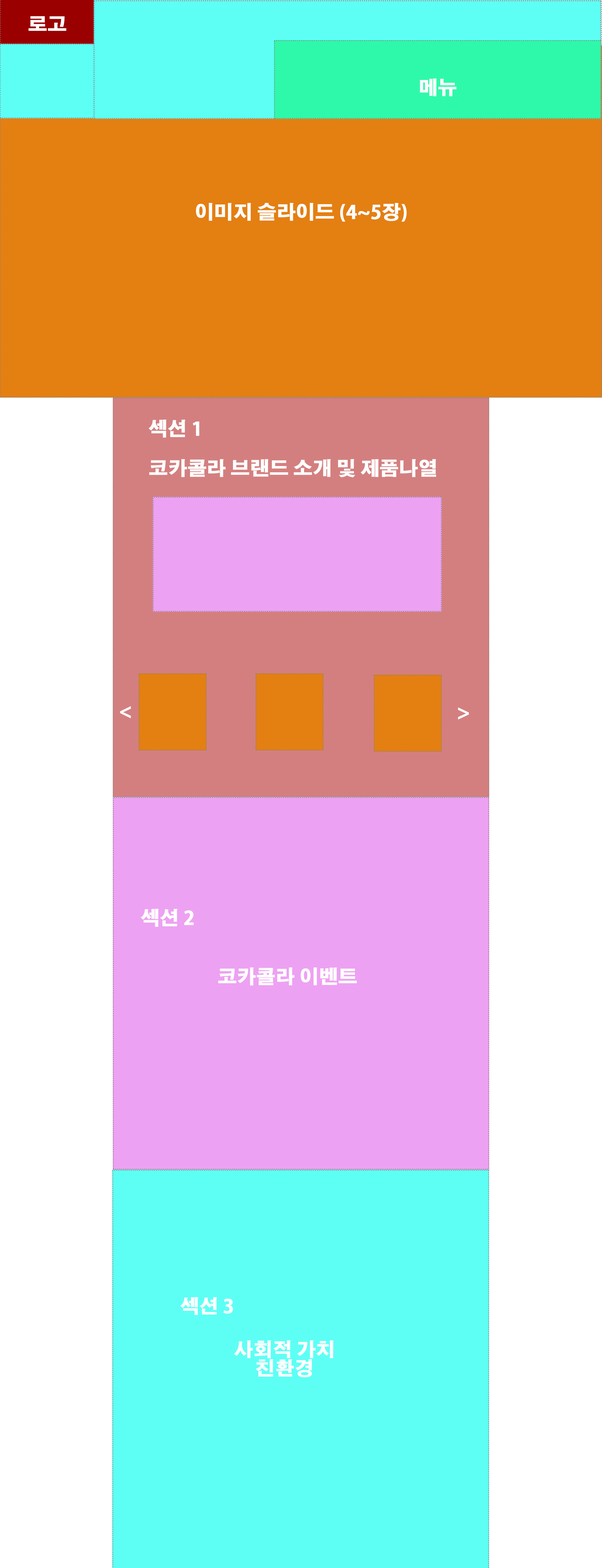
<style>
.page{position:relative;width:602px;height:1568px;background:#ffffff}
.page>*{position:absolute;margin:0}
.t1{font:18.8px "AdobeGothicStd-Bold";color:#fefefe;font-weight:bold}
.t2{font:18.8px/18.8px "AdobeGothicStd-Bold";color:#fefefe;font-weight:bold}
</style>
<div class="page">
<p class="t1" style="left:29px;top:16px;width:37px;height:15px">로고</p>
<p class="t1" style="left:420px;top:78px;width:37px;height:18px">메뉴</p>
<p class="t1" style="left:196px;top:203px;width:211px;height:19px">이미지 슬라이드 (4~5장)</p>
<p class="t1" style="left:149px;top:420px;width:50px;height:18px">섹션 1</p>
<p class="t1" style="left:149px;top:459px;width:287px;height:18px">코카콜라 브랜드 소개 및 제품나열</p>
<p class="t1" style="left:120px;top:706px;width:11px;height:12px">&lt;</p>
<p class="t1" style="left:458px;top:707px;width:11px;height:12px">&gt;</p>
<p class="t1" style="left:141px;top:909px;width:53px;height:18px">섹션 2</p>
<p class="t1" style="left:218px;top:967px;width:139px;height:19px">코카콜라 이벤트</p>
<p class="t1" style="left:180px;top:1297px;width:53px;height:18px">섹션 3</p>
<p class="t2" style="left:234px;top:1340px;width:100px;height:37px;text-align:center">사회적 가치<br>친환경</p>
</div>
